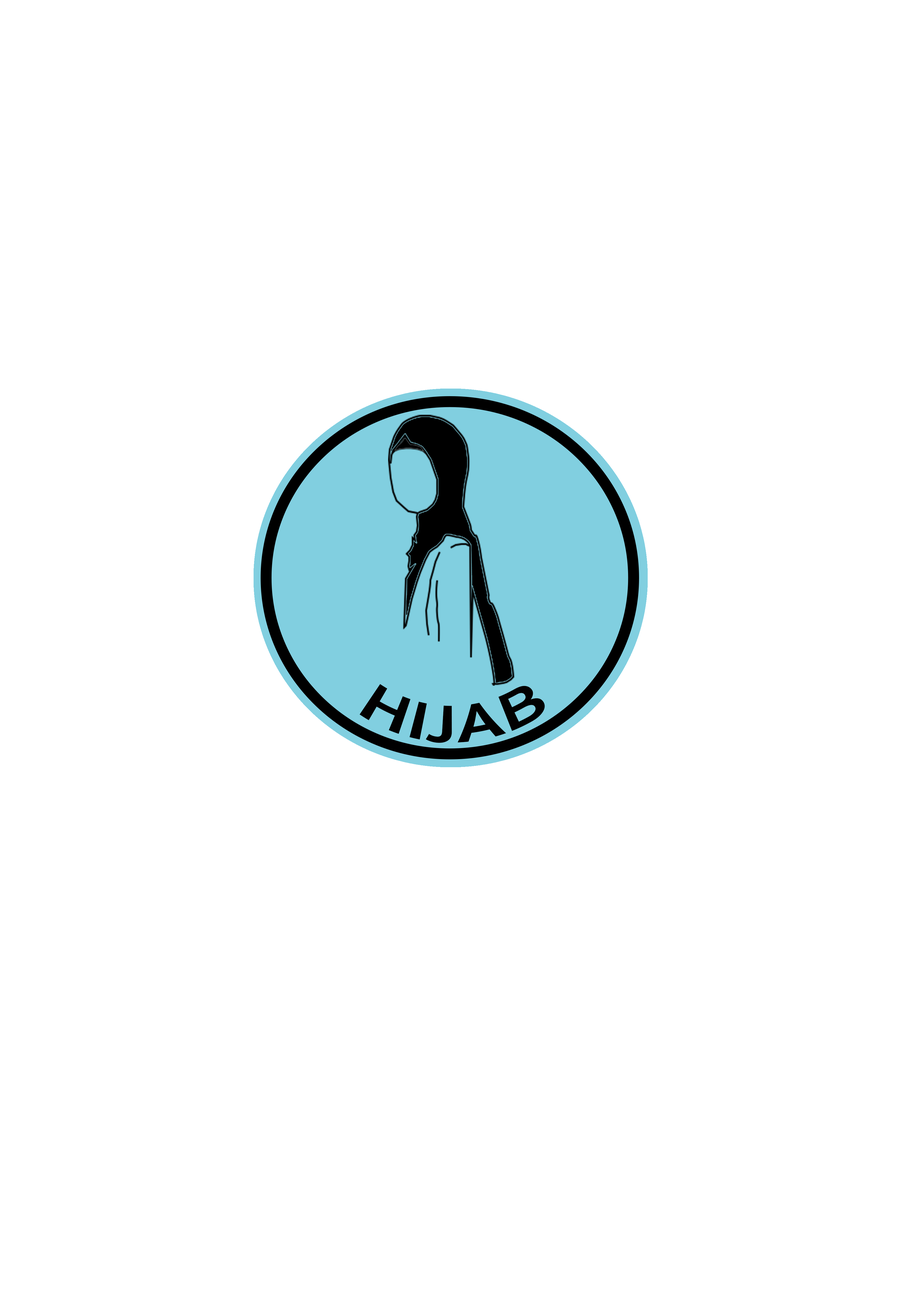
<style>
.page{position:relative;width:918px;height:1299px;background:#ffffff}
.page>*{position:absolute;margin:0}
.t1{font:54.5px "SukhumvitSet-Bold";color:#020101}
</style>
<div class="page">
<p class="t1" style="left:360px;top:684px;width:185px;height:59px;rotate:-1deg">HIJAB</p>
</div>
